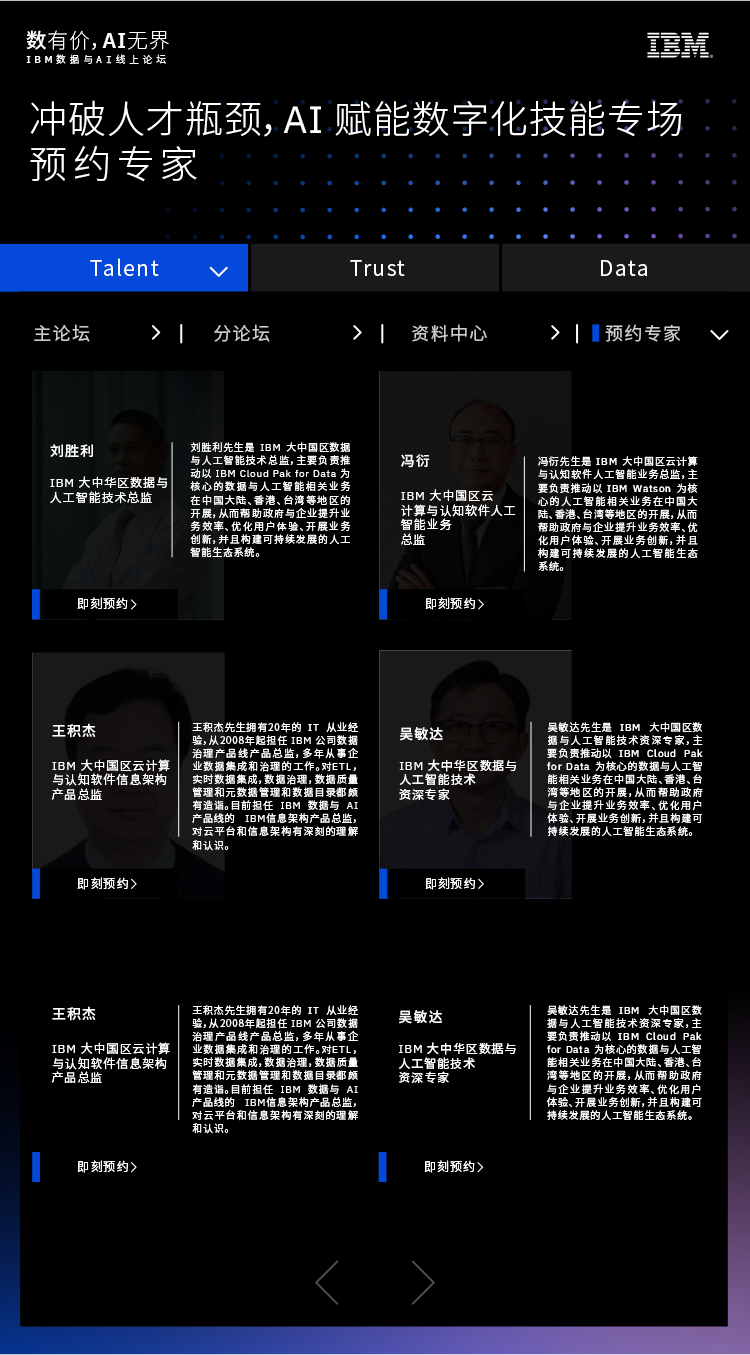
<style>
.page{position:relative;width:750px;height:1355px;background:#000000}
.page>*{position:absolute;margin:0}
.t1{font:20.7px "NotoSansCJKsc-Thin";letter-spacing:0.05em;color:#ffffff}
.t2{font:20.7px "NotoSansCJKsc-Medium";letter-spacing:0.05em;color:#ffffff}
.t3{font:20.7px "NotoSansCJKsc-Light";letter-spacing:0.05em;color:#ffffff}
.t4{font:20.7px "IBMPlexSans-SemiBold";letter-spacing:0.05em;color:#ffffff}
.t5{font:9.8px "NotoSansCJKsc-Light";letter-spacing:0.37em;color:#ffffff}
.t6{font:9.8px "IBMPlexSans-Medium";letter-spacing:0.37em;color:#ffffff}
.t7{font:9.8px "IBMPlexMono-Light";letter-spacing:0.37em;color:#ffffff}
.t8{font:38px "NotoSansCJKsc-Light";letter-spacing:0.025em;color:#ffffff}
.t9{font:38px "IBMPlexSans";letter-spacing:0.025em;color:#ffffff}
.t10{font:38px "NotoSansCJKsc-Light";letter-spacing:0.15em;color:#ffffff}
.t11{font:21px "NotoSansCJKsc-DemiLight";letter-spacing:0.075em;color:#ffffff}
.t12{font:18px "NotoSansCJKsc-DemiLight";letter-spacing:0.075em;color:#cccccc}
.t13{font:14px "NotoSansCJKsc-Medium";letter-spacing:0.075em;color:#ffffff}
.t14{font:10px/13.1px "NotoSansCJKsc-DemiLight";letter-spacing:0.075em;color:#ffffff}
.t15{font:10px/13.1px "IBMPlexSans";letter-spacing:0.075em;color:#ffffff}
.t16{font:10.1px/13.1px "NotoSansCJKsc-DemiLight";letter-spacing:0.075em;color:#ffffff}
.t17{font:10.1px/13.1px "IBMPlexSans";letter-spacing:0.075em;color:#ffffff}
.t18{font:12px "NotoSansCJKsc-DemiLight";letter-spacing:0.075em;color:#ffffff}
.t19{font:12px "IBMPlexSans";letter-spacing:0.075em;color:#ffffff}
.t20{font:12px "NotoSansCJKsc-Regular";letter-spacing:0.075em;color:#ffffff}
</style>
<div class="page">
<p class="t1" style="left:26px;top:30px;width:143px;height:20px"><span class="t2">数</span>有价<span class="t3">，</span><span class="t4">AI</span>无界</p>
<p class="t5" style="left:26px;top:54px;width:140px;height:10px"><span class="t6">IBM</span>数据与<span class="t7">AI</span>线上论坛</p>
<p class="t8" style="left:30px;top:100px;width:652px;height:37px">冲破人才瓶颈，<span class="t9">AI </span>赋能数字化技能专场</p>
<p class="t10" style="left:30px;top:146px;width:167px;height:36px">预约专家</p>
<p class="t11" style="left:90px;top:258px;width:69px;height:18px">Talent</p>
<p class="t11" style="left:350px;top:260px;width:55px;height:16px">Trust</p>
<p class="t11" style="left:601px;top:260px;width:46px;height:16px">Data</p>
<p class="t12" style="left:34px;top:324px;width:56px;height:18px">主论坛</p>
<p class="t12" style="left:214px;top:324px;width:56px;height:18px">分论坛</p>
<p class="t12" style="left:412px;top:324px;width:75px;height:18px">资料中心</p>
<p class="t12" style="left:605px;top:324px;width:76px;height:18px">预约专家</p>
<p class="t13" style="left:50px;top:444px;width:43px;height:14px">刘胜利</p>
<p class="t14" style="left:190px;top:442px;width:161px;height:115px;text-align:justify">刘胜利先生是<span class="t15"> IBM </span>大中国区数据与人工智能技术总监，主要负责推动以<span class="t15"> IBM Cloud Pak for Data </span>为核心的数据与人工智能相关业务在中国大陆、香港、台湾等地区的开展，从而帮助政府与企业提升业务效率、优化用户体验、开展业务创新，并且构建可持续发展的人工智能生态系统。</p>
<p class="t13" style="left:401px;top:454px;width:29px;height:14px">冯衍</p>
<p class="t16" style="left:538px;top:456px;width:160px;height:115px;text-align:justify">冯衍先生是<span class="t17"> IBM</span> 大中国区云计算与认知软件人工智能业务总监，主要负责推动以 <span class="t17">IBM Watson</span> 为核心的人工智能相关业务在中国大陆、香港、台湾等地区的开展，从而帮助政府与企业提升业务效率、优化用户体验、开展业务创新，并且构建可持续发展的人工智能生态系统。</p>
<p class="t18" style="left:50px;top:476px;width:117px;height:28px"><span class="t19">IBM</span> 大中华区数据与<br>人工智能技术总监</p>
<p class="t18" style="left:401px;top:489px;width:115px;height:56px"><span class="t19">IBM </span>大中国区云<br>计算与认知软件人工<br>智能业务<br>总监</p>
<p class="t18" style="left:77px;top:597px;width:51px;height:13px">即刻预约</p>
<p class="t18" style="left:425px;top:597px;width:50px;height:13px">即刻预约</p>
<p class="t13" style="left:52px;top:723px;width:44px;height:15px">王积杰</p>
<p class="t16" style="left:192px;top:722px;width:166px;height:129px;text-align:justify">王积杰先生拥有20年的 <span class="t17">IT</span> 从业经验，从2008年起担任 <span class="t17">IBM</span> 公司数据治理产品线产品总监，多年从事企业数据集成和治理的工作。对<span class="t17">ETL</span>，实时数据集成，数据治理，数据质量管理和元数据管理和数据目录都颇有造诣。目前担任<span class="t17"> IBM</span> 数据与 <span class="t17">AI</span> 产品线的<span class="t17"> IBM</span>信息架构产品总监，对云平台和信息架构有深刻的理解和认识。</p>
<p class="t16" style="left:547px;top:722px;width:156px;height:114px;text-align:justify">吴敏达先生是 <span class="t17">IBM </span>大中国区数据与人工智能技术资深专家，主要负责推动以<span class="t17"> IBM Cloud Pak for Data </span>为核心的数据与人工智能相关业务在中国大陆、香港、台湾等地区的开展，从而帮助政府与企业提升业务效率、优化用户体验、开展业务创新，并且构建可持续发展的人工智能生态系统。</p>
<p class="t13" style="left:400px;top:727px;width:43px;height:14px">吴敏达</p>
<p class="t18" style="left:52px;top:759px;width:118px;height:41px"><span class="t19">IBM </span>大中国区云计算<br>与认知软件信息架构<br>产品总监</p>
<p class="t20" style="left:399px;top:759px;width:117px;height:41px"><span class="t19">IBM</span> 大中华区数据与<br>人工智能技术<br>资深专家</p>
<p class="t18" style="left:77px;top:877px;width:51px;height:13px">即刻预约</p>
<p class="t18" style="left:425px;top:877px;width:50px;height:13px">即刻预约</p>
<p class="t13" style="left:52px;top:1006px;width:44px;height:15px">王积杰</p>
<p class="t16" style="left:192px;top:1005px;width:166px;height:129px;text-align:justify">王积杰先生拥有20年的 <span class="t17">IT</span> 从业经验，从2008年起担任 <span class="t17">IBM</span> 公司数据治理产品线产品总监，多年从事企业数据集成和治理的工作。对<span class="t17">ETL</span>，实时数据集成，数据治理，数据质量管理和元数据管理和数据目录都颇有造诣。目前担任<span class="t17"> IBM</span> 数据与 <span class="t17">AI</span> 产品线的<span class="t17"> IBM</span>信息架构产品总监，对云平台和信息架构有深刻的理解和认识。</p>
<p class="t13" style="left:399px;top:1010px;width:43px;height:14px">吴敏达</p>
<p class="t16" style="left:547px;top:1005px;width:155px;height:115px;text-align:justify">吴敏达先生是 <span class="t17">IBM </span>大中国区数据与人工智能技术资深专家，主要负责推动以<span class="t17"> IBM Cloud Pak for Data </span>为核心的数据与人工智能相关业务在中国大陆、香港、台湾等地区的开展，从而帮助政府与企业提升业务效率、优化用户体验、开展业务创新，并且构建可持续发展的人工智能生态系统。</p>
<p class="t18" style="left:52px;top:1042px;width:118px;height:41px"><span class="t19">IBM </span>大中国区云计算<br>与认知软件信息架构<br>产品总监</p>
<p class="t20" style="left:398px;top:1042px;width:118px;height:41px"><span class="t19">IBM</span> 大中华区数据与<br>人工智能技术<br>资深专家</p>
<p class="t18" style="left:77px;top:1160px;width:51px;height:13px">即刻预约</p>
<p class="t18" style="left:424px;top:1160px;width:51px;height:13px">即刻预约</p>
</div>
